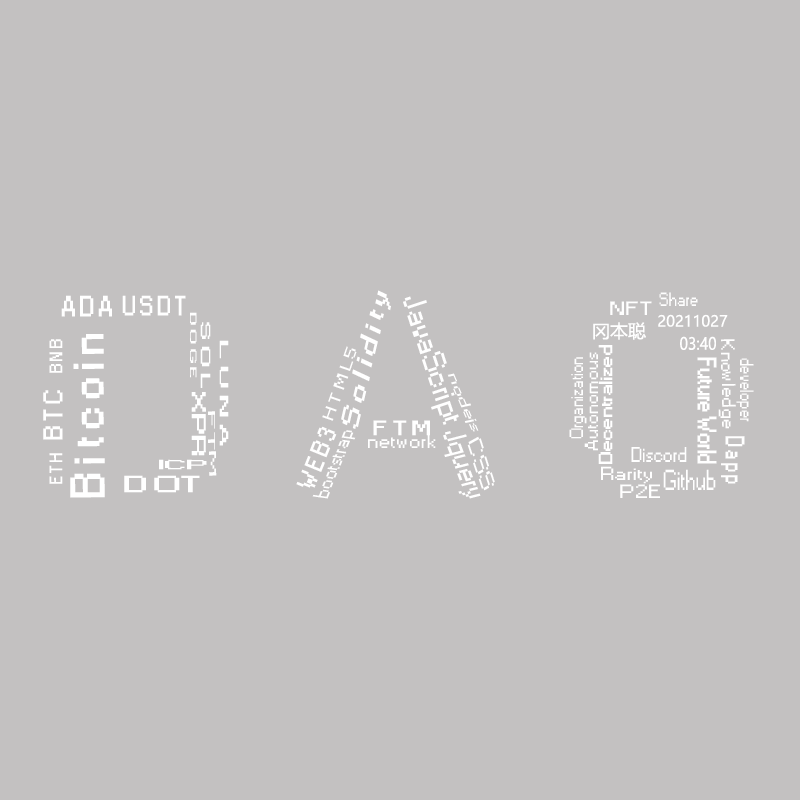
<style>
.page{position:relative;width:800px;height:800px;background:#c3c1c1}
.page>*{position:absolute;margin:0}
.t1{font:24.4px "Small Fonts";color:#ffffff;font-weight:bold;scale:1.57 1}
.t2{font:18px "Small Fonts";color:#ffffff}
.t3{font:27.1px "Small Fonts";color:#ffffff;font-weight:bold;scale:0.97 1}
.t4{font:25.7px "Small Fonts";color:#ffffff;font-weight:bold;scale:0.97 1}
.t5{font:30.2px "Small Fonts";color:#ffffff;scale:1.18 1}
.t6{font:18px "Small Fonts";color:#ffffff;scale:1.62 1}
.t7{font:8.6px "Small Fonts";color:#ffffff;font-weight:bold;scale:2.77 1}
.t8{font:15px "MicrosoftYaHei";color:#ffffff}
.t9{font:12.4px "Small Fonts";color:#ffffff;font-weight:bold;scale:2.72 1}
.t10{font:18px "MicrosoftYaHei";color:#ffffff}
.t11{font:16.8px "Small Fonts";color:#ffffff;font-weight:bold;scale:1.05 1}
.t12{font:45px "Small Fonts";color:#ffffff;font-weight:bold;scale:1.05 1}
.t13{font:10.9px "Small Fonts";color:#ffffff;font-weight:bold;scale:3.76 1}
.t14{font:16.6px "MicrosoftYaHei";color:#ffffff;scale:0.86 1}
.t15{font:18px "Small Fonts";color:#ffffff;scale:1.23 1}
.t16{font:14.8px "Small Fonts";color:#ffffff;scale:1.69 1}
.t17{font:17.7px "Small Fonts";color:#ffffff;scale:1.22 1}
.t18{font:17.7px "Small Fonts";color:#ffffff;font-weight:bold;scale:1.35 1}
.t19{font:24.6px "Small Fonts";color:#ffffff;font-weight:bold;scale:0.96 1}
.t20{font:13.3px "Small Fonts";color:#ffffff;scale:1.97 1}
.t21{font:25.1px "Small Fonts";color:#ffffff;font-weight:bold;scale:1.05 1}
.t22{font:18.4px "Small Fonts";color:#ffffff;font-weight:bold;scale:2.13 1}
.t23{font:9.3px "Small Fonts";color:#ffffff;scale:4.76 1}
.t24{font:19.3px "Small Fonts";color:#ffffff;font-weight:bold;scale:1.59 1}
.t25{font:23.7px "Small Fonts";color:#ffffff;font-weight:bold}
.t26{font:20.1px "Small Fonts";color:#ffffff;scale:1.06 1}
.t27{font:18.7px "Small Fonts";color:#ffffff;scale:1.31 1}
.t28{font:29.4px "Small Fonts";color:#ffffff;scale:1.04 1}
.t29{font:19.7px "Small Fonts";color:#ffffff;scale:1.64 1}
.t30{font:24.6px "Small Fonts";color:#ffffff;font-weight:bold;scale:0.81 1}
.t31{font:20px "Small Fonts";color:#ffffff}
.t32{font:12.2px "Small Fonts";color:#ffffff;font-weight:bold;scale:3.19 1}
.t33{font:17.7px "Small Fonts";color:#ffffff;scale:1.46 1}
.t34{font:26.9px "Small Fonts";color:#ffffff;scale:0.81 1}
.t35{font:21.7px "Small Fonts";color:#ffffff;font-weight:bold;scale:1.99 1}
.t36{font:18px "Small Fonts";color:#ffffff;scale:1.56 1}
</style>
<div class="page">
<p class="t1" style="left:341px;top:290px;width:50px;height:139px;rotate:-77deg">S o l i d i t y</p>
<p class="t2" style="left:659px;top:292px;width:39px;height:14px">Share</p>
<p class="t3" style="left:61px;top:295px;width:51px;height:22px">A D A</p>
<p class="t4" style="left:122px;top:295px;width:64px;height:21px">U S D T</p>
<p class="t5" style="left:403px;top:296px;width:56px;height:129px;rotate:72deg">JavaScript</p>
<p class="t6" style="left:610px;top:301px;width:42px;height:14px">NFT</p>
<p class="t7" style="left:190px;top:312px;width:7px;height:66px;rotate:90deg">D O G E</p>
<p class="t8" style="left:658px;top:314px;width:70px;height:13px">20211027</p>
<p class="t9" style="left:200px;top:322px;width:11px;height:66px;rotate:90deg">S O L</p>
<p class="t10" style="left:593px;top:322px;width:53px;height:18px">冈本聪</p>
<p class="t11" style="left:49px;top:339px;width:14px;height:34px;rotate:-90deg">B N B</p>
<p class="t12" style="left:70px;top:334px;width:35px;height:164px;rotate:-90deg">B i t c o i n</p>
<p class="t13" style="left:219px;top:340px;width:10px;height:106px;rotate:90deg">L U N A</p>
<p class="t14" style="left:680px;top:336px;width:36px;height:14px">03:40</p>
<p class="t15" style="left:718px;top:339px;width:18px;height:90px;rotate:89deg">Knowledge</p>
<p class="t16" style="left:322px;top:346px;width:35px;height:75px;rotate:-71deg">H T M L5</p>
<p class="t17" style="left:584px;top:352px;width:14px;height:99px;rotate:-90deg">Autonomous</p>
<p class="t18" style="left:598px;top:345px;width:15px;height:119px;rotate:-90deg">Decentralized</p>
<p class="t2" style="left:569px;top:357px;width:18px;height:82px;rotate:-90deg">Organization</p>
<p class="t19" style="left:697px;top:357px;width:20px;height:107px;rotate:90deg">Future World</p>
<p class="t2" style="left:736px;top:358px;width:18px;height:64px;rotate:90deg">developer</p>
<p class="t20" style="left:447px;top:373px;width:32px;height:59px;rotate:67deg">nodejs</p>
<p class="t21" style="left:43px;top:390px;width:20px;height:50px;rotate:-90deg">B T C</p>
<p class="t22" style="left:191px;top:392px;width:15px;height:64px;rotate:90deg">XPR</p>
<p class="t23" style="left:208px;top:411px;width:9px;height:65px;rotate:90deg">FTM</p>
<p class="t24" style="left:373px;top:420px;width:57px;height:16px">F T M</p>
<p class="t25" style="left:296px;top:426px;width:41px;height:62px;rotate:-68deg">W E B 3</p>
<p class="t26" style="left:312px;top:430px;width:44px;height:69px;rotate:-68deg">bootstrap</p>
<p class="t27" style="left:368px;top:434px;width:68px;height:14px">network</p>
<p class="t28" style="left:443px;top:431px;width:38px;height:68px;rotate:70deg">Jquery</p>
<p class="t29" style="left:467px;top:436px;width:28px;height:55px;rotate:72deg">CSS</p>
<p class="t30" style="left:721px;top:436px;width:24px;height:48px;rotate:90deg">D a p p</p>
<p class="t31" style="left:631px;top:447px;width:56px;height:15px">Discord</p>
<p class="t11" style="left:49px;top:453px;width:14px;height:31px;rotate:-90deg">E T H</p>
<p class="t32" style="left:159px;top:459px;width:48px;height:11px">ICP</p>
<p class="t33" style="left:601px;top:466px;width:51px;height:18px">Rarity</p>
<p class="t34" style="left:663px;top:469px;width:53px;height:21px">Github</p>
<p class="t35" style="left:124px;top:475px;width:76px;height:18px">D OT</p>
<p class="t36" style="left:620px;top:484px;width:40px;height:14px">P2E</p>
</div>
